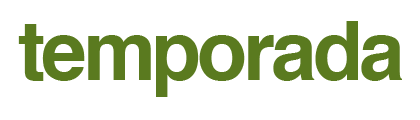
<style>
.page{position:relative;width:420px;height:120px;background:#ffffff}
.page>*{position:absolute;margin:0}
.t1{font:82px "Helvetica-Bold";letter-spacing:-0.05em;color:#5a7a1f}
</style>
<div class="page">
<p class="t1" style="left:18px;top:21px;width:384px;height:76px">temporada</p>
</div>
